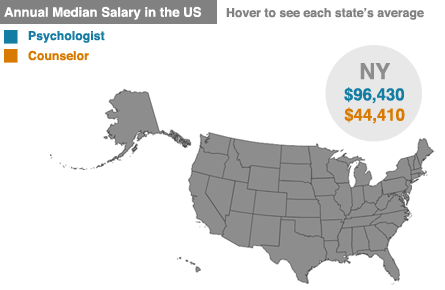
<style>
.page{position:relative;width:445px;height:290px;background:#ffffff}
.page>*{position:absolute;margin:0}
.t1{font:13.2px "Helvetica-Bold";color:#ffffff}
.t2{font:12.3px "Helvetica-Bold";color:#818182}
.t3{font:12.3px "Helvetica-Bold";color:#147ca3}
.t4{font:12.3px "Helvetica-Bold";color:#d87a00}
.t5{font:22.3px "Helvetica-Bold";color:#8d8d8d}
.t6{font:16.8px "Helvetica-Bold";color:#137da4}
.t7{font:16.8px "Helvetica-Bold";color:#d87a00}
</style>
<div class="page">
<p class="t1" style="left:4px;top:6px;width:198px;height:14px">Annual Median Salary in the US</p>
<p class="t2" style="left:226px;top:8px;width:198px;height:12px">Hover to see each state’s average</p>
<p class="t3" style="left:28px;top:31px;width:77px;height:12px">Psychologist</p>
<p class="t4" style="left:28px;top:50px;width:61px;height:11px">Counselor</p>
<p class="t5" style="left:360px;top:63px;width:30px;height:17px">NY</p>
<p class="t6" style="left:344px;top:87px;width:60px;height:17px">$96,430</p>
<p class="t7" style="left:344px;top:107px;width:61px;height:17px">$44,410</p>
</div>
